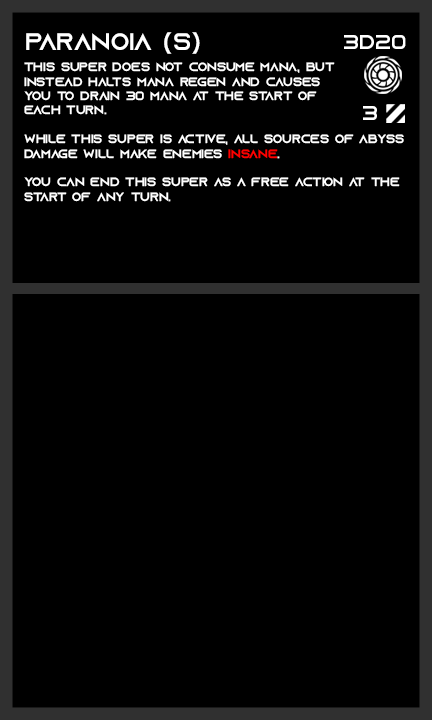
<style>
.page{position:relative;width:432px;height:720px;background:#000000}
.page>*{position:absolute;margin:0}
.t1{font:24px "AzonixRegular";color:#ffffff}
.t2{font:20px "AzonixRegular";color:#ffffff}
.t3{font:12px "AzonixRegular";color:#ffffff}
.t4{font:12px "AzonixRegular";color:#ff0000}
</style>
<div class="page">
<p class="t1" style="left:26px;top:32px;width:174px;height:22px">paranoia (s)</p>
<p class="t2" style="left:344px;top:35px;width:62px;height:14px">3d20</p>
<p class="t3" style="left:24px;top:62px;width:380px;height:140px">this super does not consume mana, but<br>instead halts mana regen and causes<br>you to drain 30 mana at the start of <br>each turn.<br><br>while this super is active, all sources of abyss<br>damage will make enemies <span class="t4">insane</span>.<br><br>you can end this super as a free action at the<br>start of any turn.</p>
<p class="t2" style="left:363px;top:106px;width:14px;height:14px">3</p>
</div>
